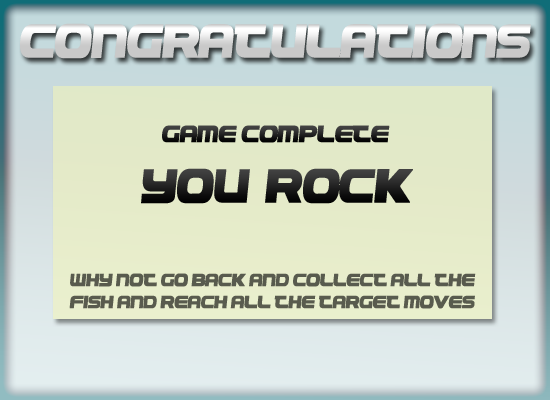
<style>
.page{position:relative;width:550px;height:400px}
.page>*{position:absolute;margin:0}
.t1{font:48px "!PEPSI!";font-weight:bold}
.t2{font:24px "!PEPSI!";font-weight:bold}
.t3{font:18px "!PEPSI!";color:#595b4e;font-weight:bold}
</style>
<div class="page">
<p class="t1" style="left:20px;top:23px;width:511px;height:36px">Congratulations</p>
<p class="t2" style="left:162px;top:125px;width:228px;height:18px">Game complete</p>
<p class="t1" style="left:141px;top:168px;width:272px;height:36px">You’ rock</p>
<p class="t3" style="left:69px;top:273px;width:407px;height:36px">why not go back and collect all the fish and reach all the target moves?</p>
</div>
